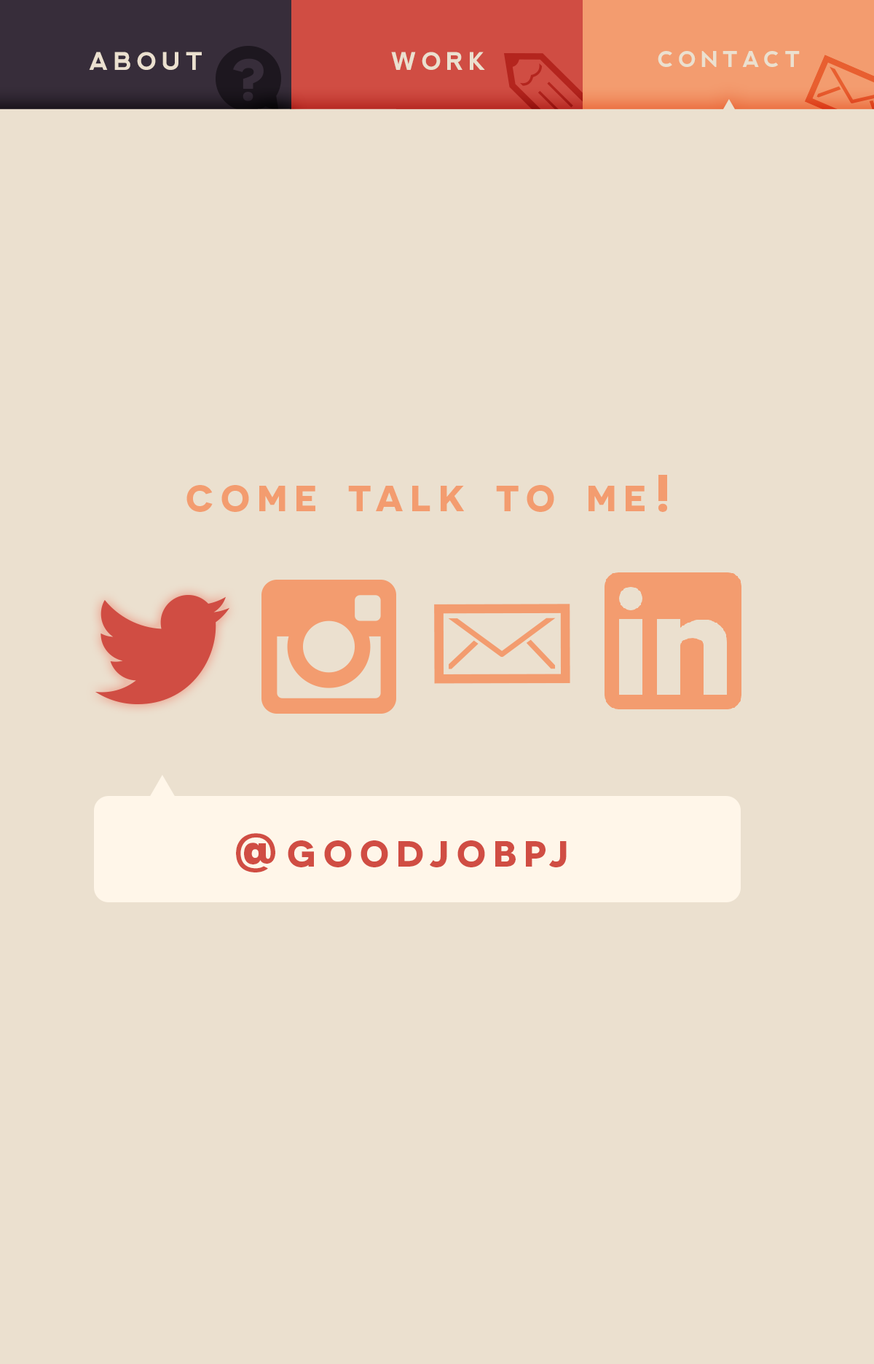
<style>
.page{position:relative;width:874px;height:1364px;background:#ebe0cf}
.page>*{position:absolute;margin:0}
.t1{font:35px "nevis-Bold";letter-spacing:0.2em;color:#ebe0cf;font-variant:small-caps}
.t2{font:21.9px "nevis-Bold";letter-spacing:0.2em;color:#ebe0cf}
.t3{font:52.4px "Novecentosanswide-Bold";letter-spacing:0.2em;color:#f39c6f;font-variant:small-caps}
.t4{font:52.4px "Novecentosanswide-Bold";letter-spacing:0.2em;color:#d04d43;font-variant:small-caps}
</style>
<div class="page">
<p class="t1" style="left:89px;top:52px;width:113px;height:18px">about</p>
<p class="t1" style="left:391px;top:52px;width:94px;height:18px">work</p>
<p class="t2" style="left:658px;top:51px;width:142px;height:16px">CONTACT</p>
<p class="t3" style="left:186px;top:475px;width:481px;height:37px">come talk to me!</p>
<p class="t4" style="left:236px;top:833px;width:331px;height:40px">@goodjobpj</p>
</div>
